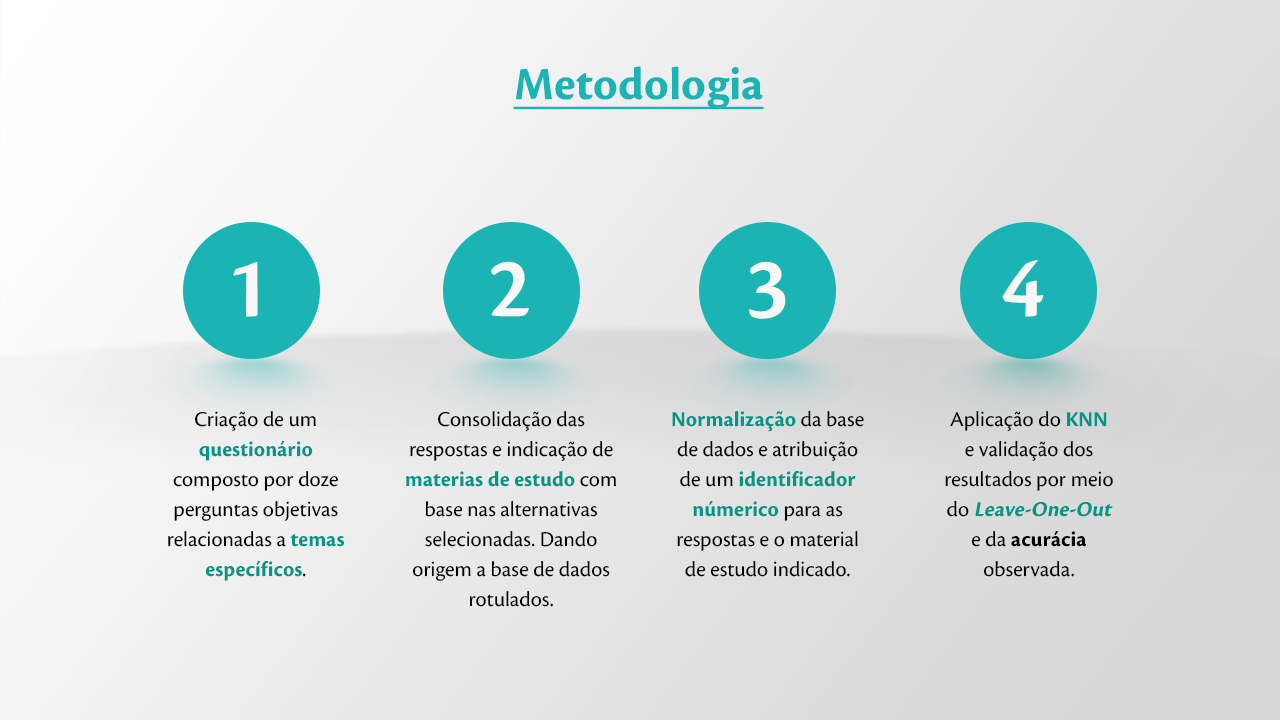
<style>
.page{position:relative;width:1280px;height:720px}
.page>*{position:absolute;margin:0}
.t1{font:48px "CronosPro-Bold";color:#1ab4b4;text-decoration:underline}
.t2{font:89.9px "CronosPro-Semibold";color:#f8f8f8}
.t3{font:22px/30px "CronosPro-Regular";color:#000000}
.t4{font:22px/30px "CronosPro-Bold";color:#009688}
.t5{font:22px/30px "CronosPro-Bold";color:#009688;font-style:italic}
.t6{font:22px/30px "CronosPro-Bold";color:#000000}
</style>
<div class="page">
<p class="t1" style="left:513px;top:66px;width:251px;height:44px">Metodologia</p>
<p class="t2" style="left:233px;top:262px;width:25px;height:55px">1</p>
<p class="t2" style="left:491px;top:261px;width:38px;height:56px">2</p>
<p class="t2" style="left:749px;top:261px;width:37px;height:58px">3</p>
<p class="t2" style="left:1002px;top:260px;width:42px;height:57px">4</p>
<p class="t3" style="left:168px;top:411px;width:177px;height:170px;text-align:center">Criação de um <span class="t4">questionário </span>composto por doze perguntas objetivas relacionadas a <span class="t4">temas específicos</span>.</p>
<p class="t3" style="left:405px;top:411px;width:212px;height:196px;text-align:center">Consolidação das respostas e indicação de <span class="t4">materias de estudo</span> com base nas alternativas selecionadas. Dando origem a base de dados rotulados.</p>
<p class="t3" style="left:672px;top:410px;width:192px;height:167px;text-align:center"><span class="t4">Normalização </span>da base <br>de dados e atribuição <br>de um <span class="t4">identificador númerico</span> para as respostas e o material de estudo indicado.</p>
<p class="t3" style="left:945px;top:411px;width:168px;height:166px;text-align:center">Aplicação do <span class="t4">KNN <br></span>e validação dos resultados por meio do <span class="t5">Leave-One-Out <br></span>e da <span class="t6">acurácia </span>observada.</p>
</div>
